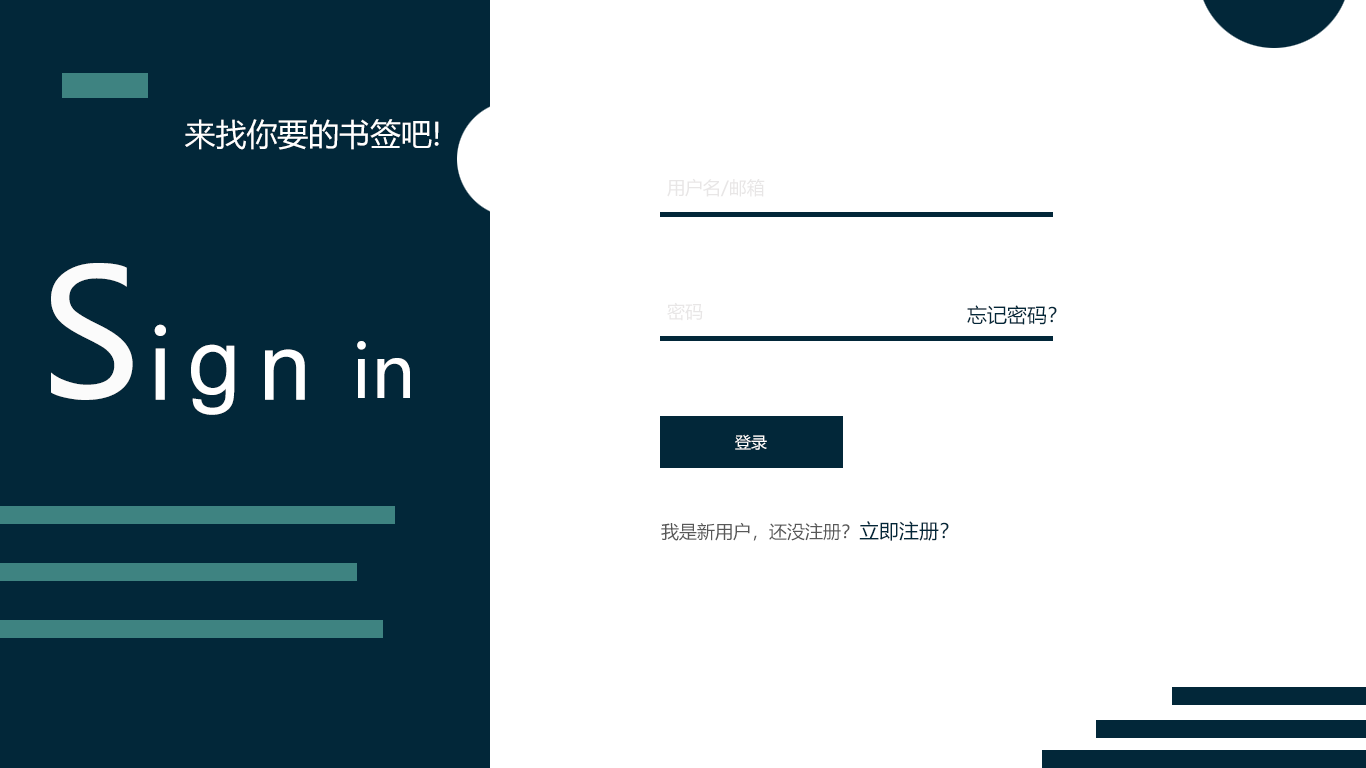
<style>
.page{position:relative;width:1366px;height:768px;background:#ffffff}
.page>*{position:absolute;margin:0}
.t1{font:30.9px "MicrosoftYaHei";color:#ffffff}
.t2{font:18px "MicrosoftYaHei";color:#e8e6e6}
.t3{font:174.9px "MicrosoftYaHei";color:#fbfbfb}
.t4{font:20px "MicrosoftYaHei";color:#022739}
.t5{font:94.8px "MicrosoftYaHei";color:#ffffff}
.t6{font:72px "MicrosoftYaHei";color:#ffffff}
.t7{font:94.8px "ArialMT";color:#ffffff}
.t8{font:16px "MicrosoftYaHei";color:#ffffff}
.t9{font:18px "MicrosoftYaHei";color:#585858}
</style>
<div class="page">
<p class="t1" style="left:185px;top:119px;width:254px;height:31px">来找你要的书签吧!</p>
<p class="t2" style="left:667px;top:178px;width:98px;height:19px">用户名/邮箱</p>
<p class="t3" style="left:51px;top:263px;width:82px;height:137px">S</p>
<p class="t2" style="left:667px;top:302px;width:36px;height:19px">密码</p>
<p class="t4" style="left:967px;top:305px;width:90px;height:20px">忘记密码？</p>
<p class="t5" style="left:154px;top:324px;width:12px;height:76px">i</p>
<p class="t6" style="left:357px;top:341px;width:53px;height:57px">in</p>
<p class="t7" style="left:191px;top:344px;width:44px;height:71px">g</p>
<p class="t7" style="left:265px;top:349px;width:40px;height:51px">n</p>
<p class="t8" style="left:735px;top:434px;width:32px;height:16px">登录</p>
<p class="t4" style="left:859px;top:521px;width:90px;height:20px">立即注册？</p>
<p class="t9" style="left:661px;top:522px;width:189px;height:19px">我是新用户，还没注册？</p>
</div>
